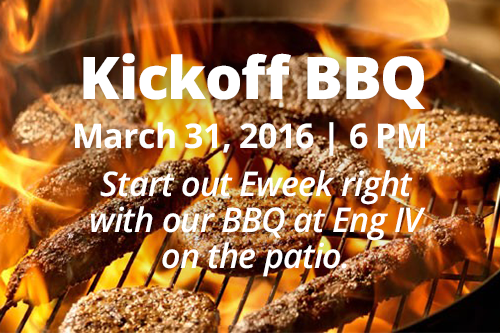
<style>
.page{position:relative;width:500px;height:333px}
.page>*{position:absolute;margin:0}
.t1{font:59.1px "OpenSans-Extrabold";letter-spacing:-0.02em;color:#ffffff}
.t2{font:34px "OpenSans-Bold";letter-spacing:-0.02em;color:#ffffff}
.t3{font:34px/35.6px "OpenSans-SemiboldItalic";letter-spacing:-0.02em;color:#ffffff}
</style>
<div class="page">
<p class="t1" style="left:83px;top:53px;width:342px;height:56px">Kickoff BBQ</p>
<p class="t2" style="left:75px;top:122px;width:350px;height:34px">March 31, 2016 | 6 PM</p>
<p class="t3" style="left:91px;top:170px;width:335px;height:107px;text-align:center">Start out Eweek right with our BBQ at Eng IV on the patio.</p>
</div>
